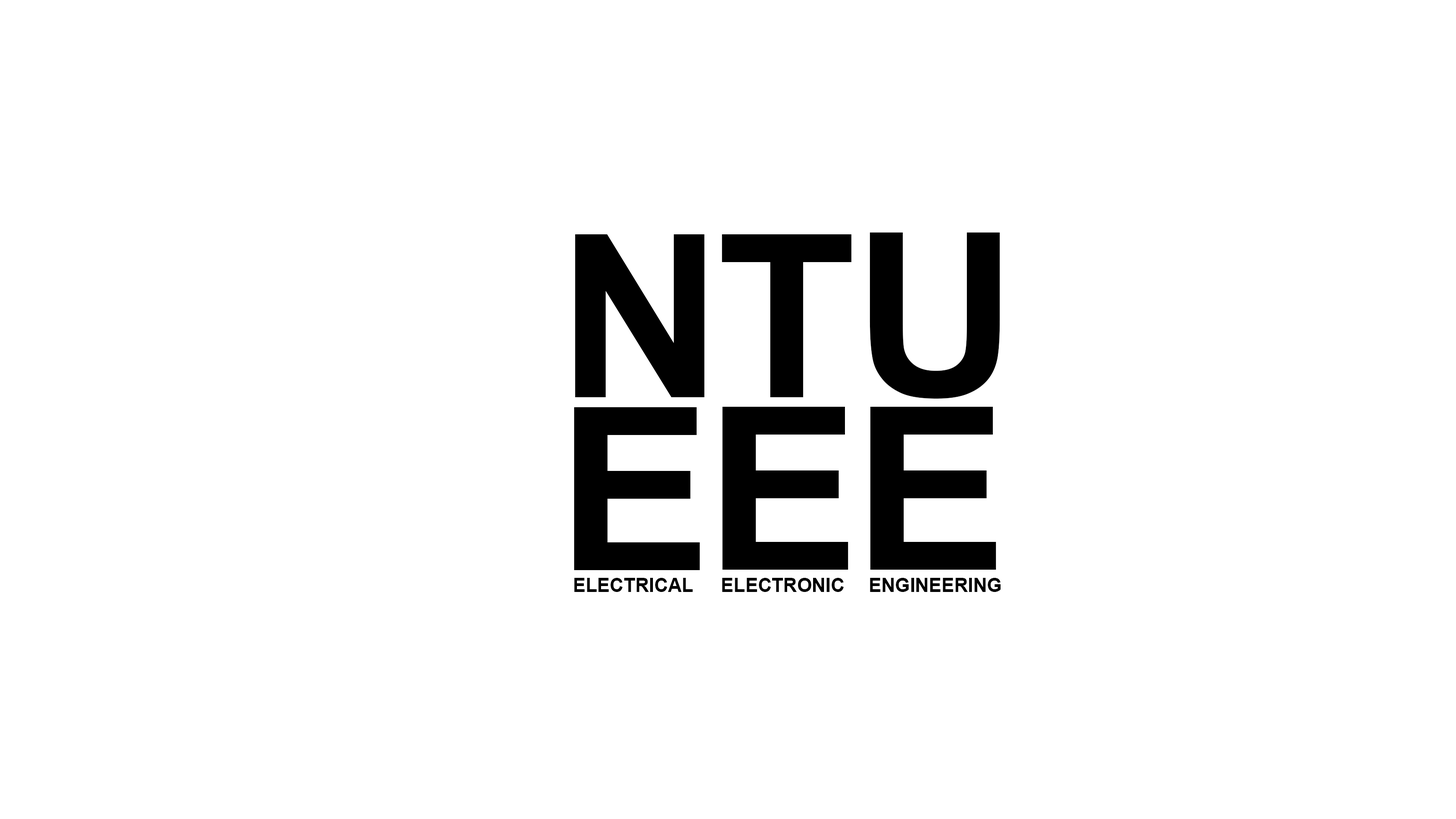
<style>
.page{position:relative;width:1456px;height:819px;background:#ffffff}
.page>*{position:absolute;margin:0}
.t1{font:227.5px "Arial-BoldMT";color:#000000}
.t2{font:19.6px "Arial-BoldMT";color:#000000}
</style>
<div class="page">
<p class="t1" style="left:869px;top:233px;width:131px;height:166px">U</p>
<p class="t1" style="left:575px;top:234px;width:130px;height:163px">N</p>
<p class="t1" style="left:722px;top:234px;width:130px;height:163px">T</p>
<p class="t1" style="left:574px;top:407px;width:126px;height:163px">E</p>
<p class="t1" style="left:722px;top:407px;width:126px;height:163px">E</p>
<p class="t1" style="left:870px;top:407px;width:126px;height:163px">E</p>
<p class="t2" style="left:574px;top:578px;width:427px;height:14px">ELECTRICAL       ELECTRONIC        ENGINEERING</p>
</div>
